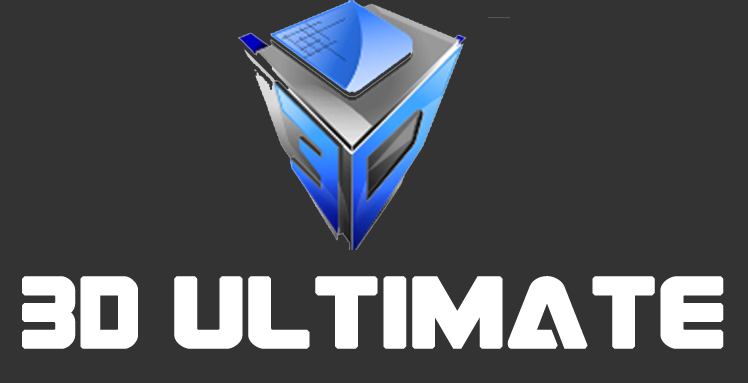
<style>
.page{position:relative;width:748px;height:383px;background:#333333}
.page>*{position:absolute;margin:0}
.t1{font:112.6px "AstroArmadaExpanded";letter-spacing:0.02em;color:#ffffff;font-weight:bold;scale:0.85 1}
.t2{font:112.6px "AstroArmada";letter-spacing:0.02em;color:#ffffff;font-weight:bold;scale:0.85 1}
</style>
<div class="page">
<p class="t1" style="left:22px;top:276px;width:702px;height:73px"><span class="t2">3d </span>ultimate</p>
</div>
